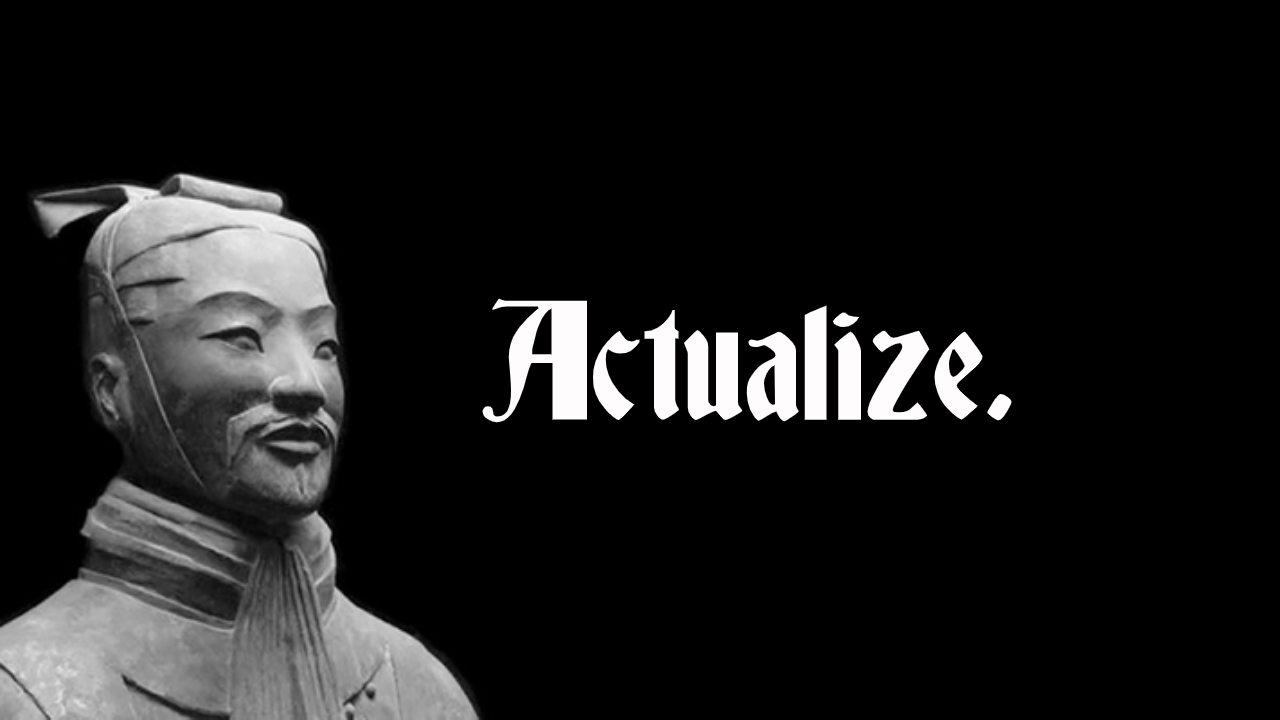
<style>
.page{position:relative;width:1280px;height:720px;background:#000000}
.page>*{position:absolute;margin:0}
.t1{font:151.6px "Deutsch-Gothic";color:#fefcfc}
</style>
<div class="page">
<p class="t1" style="left:482px;top:298px;width:530px;height:125px">Actualize.</p>
</div>
